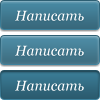
<style>
.page{position:relative;width:100px;height:105px}
.page>*{position:absolute;margin:0}
.t1{font:14px "Georgia-Italic";color:#ffffff}
</style>
<div class="page">
<p class="t1" style="left:15px;top:10px;width:69px;height:11px">Написать</p>
<p class="t1" style="left:15px;top:45px;width:69px;height:11px">Написать</p>
<p class="t1" style="left:15px;top:80px;width:69px;height:11px">Написать</p>
</div>
